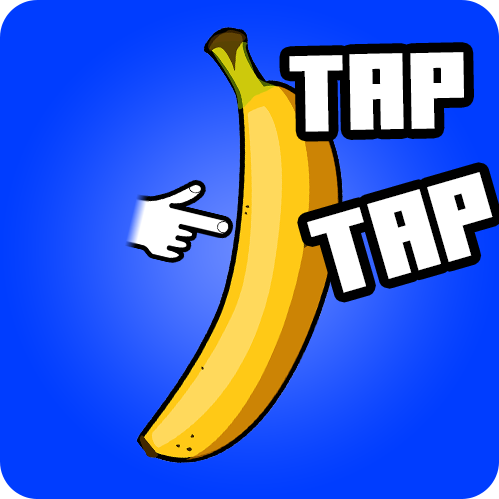
<style>
.page{position:relative;width:499px;height:499px;background:#003dff}
.page>*{position:absolute;margin:0}
.t1{font:77.5px "MinercraftoryRegular";color:#ffffff}
.t2{font:79.7px "MinercraftoryRegular";color:#ffffff}
</style>
<div class="page">
<p class="t1" style="left:289px;top:52px;width:175px;height:80px;rotate:-1deg">TAP</p>
<p class="t2" style="left:307px;top:172px;width:186px;height:121px;rotate:-16deg">TAP</p>
</div>
